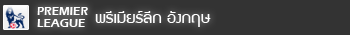
<style>
.page{position:relative;width:350px;height:35px;background:#333333}
.page>*{position:absolute;margin:0}
.t1{font:12px/12px "ErasITC-Demi";color:#ffffff}
.t2{font:17.2px "supermarket";color:#ffffff;scale:1.09 1}
</style>
<div class="page">
<p class="t1" style="left:37px;top:7px;width:51px;height:20px">PREMIER <br>LEAGUE</p>
<p class="t2" style="left:95px;top:11px;width:116px;height:16px">พรีเมียร์ลีก อังกฤษ</p>
</div>
